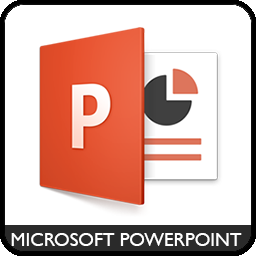
<style>
.page{position:relative;width:256px;height:256px;background:#ffffff}
.page>*{position:absolute;margin:0}
.t1{font:19px "GillSansMT";color:#ffffff}
</style>
<div class="page">
<p class="t1" style="left:11px;top:233px;width:231px;height:13px">MICROSOFT POWERPOINT</p>
</div>
